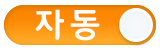
<style>
.page{position:relative;width:160px;height:50px;background:#ffffff}
.page>*{position:absolute;margin:0}
.t1{font:33.3px "12LotteMartDreamBold";letter-spacing:0.2em;color:#ffffff}
</style>
<div class="page">
<p class="t1" style="left:35px;top:9px;width:65px;height:32px">자동</p>
</div>
